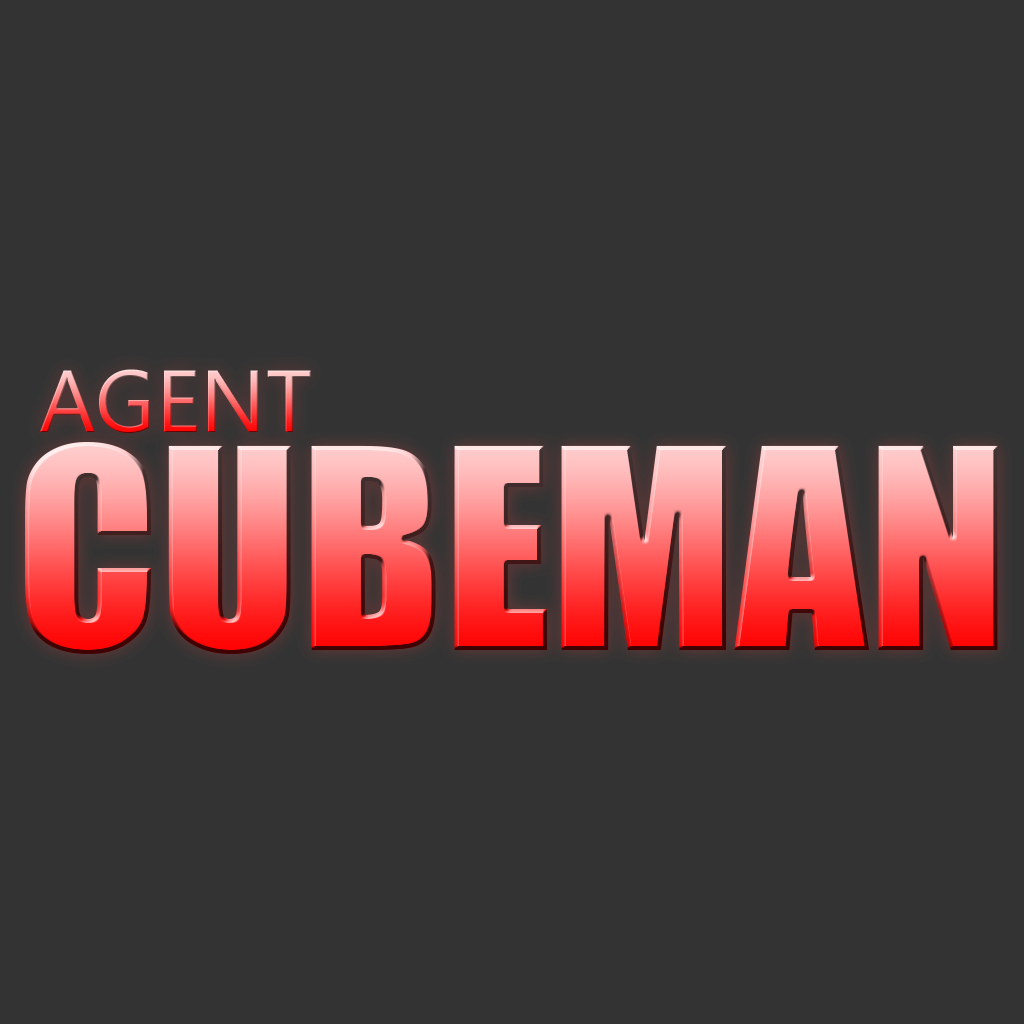
<style>
.page{position:relative;width:1024px;height:1024px;background:#333333}
.page>*{position:absolute;margin:0}
.t1{font:87.8px "MicrosoftNewTaiLue"}
.t2{font:258.4px "Impact"}
</style>
<div class="page">
<p class="t1" style="left:40px;top:369px;width:271px;height:64px">AGENT</p>
<p class="t2" style="left:25px;top:441px;width:973px;height:213px">CUBEMAN</p>
</div>
